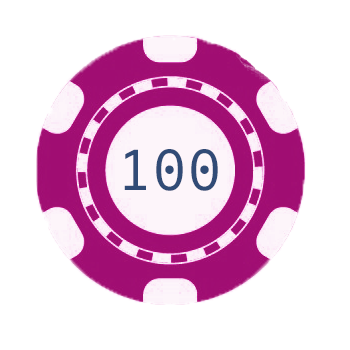
<style>
.page{position:relative;width:350px;height:350px;background:#ffffff}
.page>*{position:absolute;margin:0}
.t1{font:58.3px "AndaleMono";color:#314b76}
</style>
<div class="page">
<p class="t1" style="left:124px;top:149px;width:94px;height:42px">100</p>
</div>
